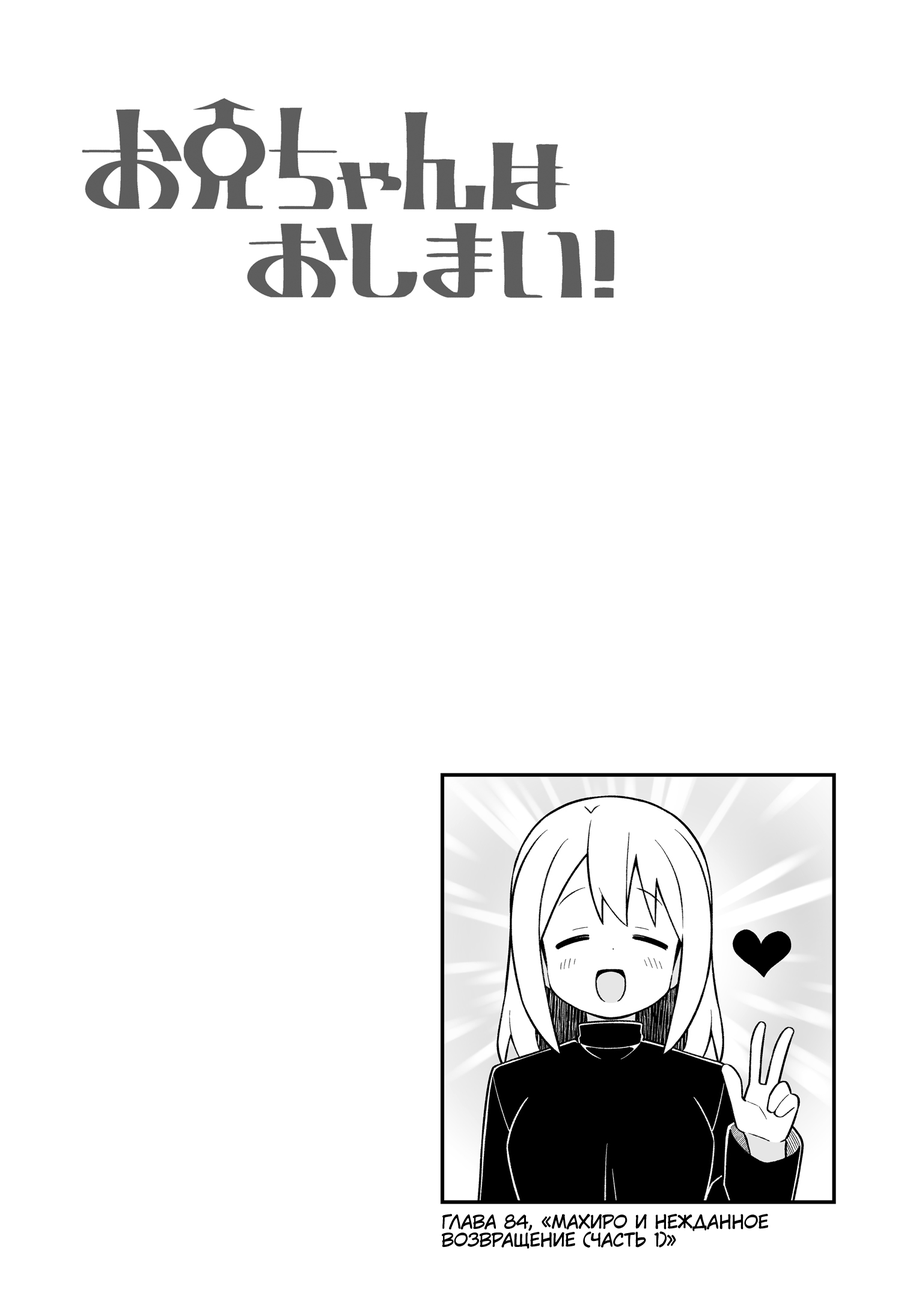
<style>
.page{position:relative;width:919px;height:1298px;background:#ffffff}
.page>*{position:absolute;margin:0}
.t1{font:18px "KuraiVoice2";color:#000000;text-transform:uppercase}
</style>
<div class="page">
<p class="t1" style="left:442px;top:1214px;width:326px;height:35px">Глава 84, «Махиро и нежданное<br>возвращение (часть 1)»</p>
</div>
